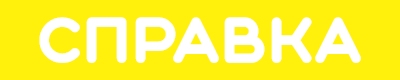
<style>
.page{position:relative;width:400px;height:80px;background:#fff10c}
.page>*{position:absolute;margin:0}
.t1{font:61px "Aqum";color:#ffffff}
</style>
<div class="page">
<p class="t1" style="left:39px;top:17px;width:322px;height:46px">СПРАВКА</p>
</div>
